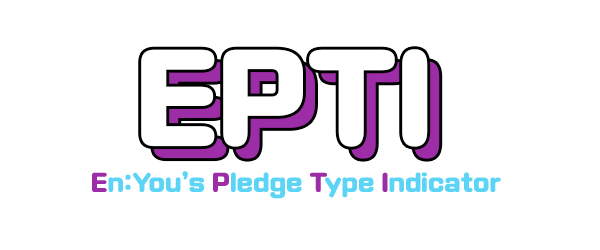
<style>
.page{position:relative;width:600px;height:250px;background:#ffffff}
.page>*{position:absolute;margin:0}
.t1{font:120px "TypoDabangguB";color:#ffffff}
.t2{font:24px "TypoDabangguB";color:#5cd4f6}
.t3{font:24px "TypoDabangguB";color:#9d2da6}
</style>
<div class="page">
<p class="t1" style="left:141px;top:49px;width:287px;height:98px">EPTI</p>
<p class="t2" style="left:92px;top:171px;width:409px;height:28px"><span class="t3">E</span>n:You’s <span class="t3">P</span>ledge <span class="t3">T</span>ype <span class="t3">I</span>ndicator</p>
</div>
